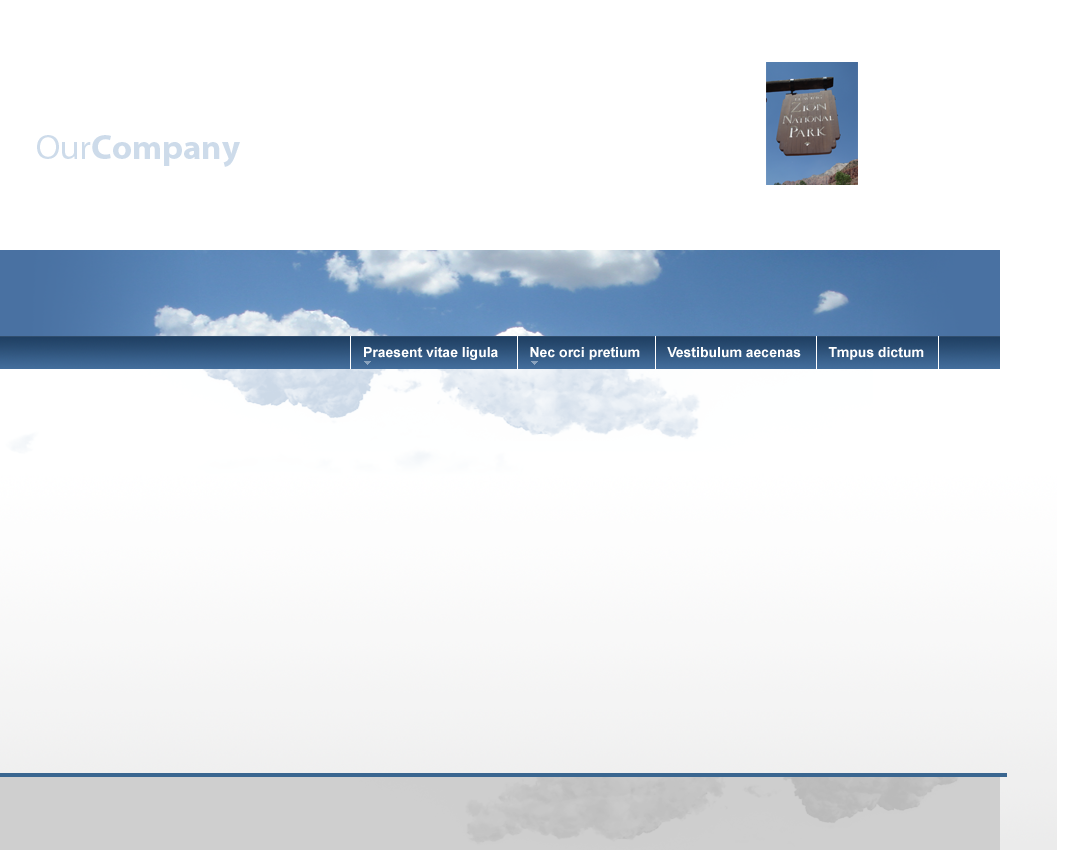
<style>
.page{position:relative;width:1080px;height:850px;background:#ffffff}
.page>*{position:absolute;margin:0}
.t1{font:35px "MyriadPro-Bold";color:#cddbea}
.t2{font:35px "MyriadPro-Regular";color:#cddbea}
.t3{font:14px "Arial-BoldMT";color:#ffffff}
</style>
<div class="page">
<p class="t1" style="left:37px;top:135px;width:203px;height:32px"><span class="t2">Our</span>Company</p>
<p class="t3" style="left:364px;top:347px;width:560px;height:13px">Praesent vitae ligula        Nec orci pretium       Vestibulum aecenas       Tmpus dictum</p>
</div>
